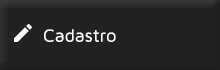
<style>
.page{position:relative;width:220px;height:70px;background:#212121}
.page>*{position:absolute;margin:0}
.t1{font:18px "MavenProRegular";letter-spacing:0.025em;color:#ffffff}
</style>
<div class="page">
<p class="t1" style="left:44px;top:29px;width:72px;height:13px">Cadastro</p>
</div>
